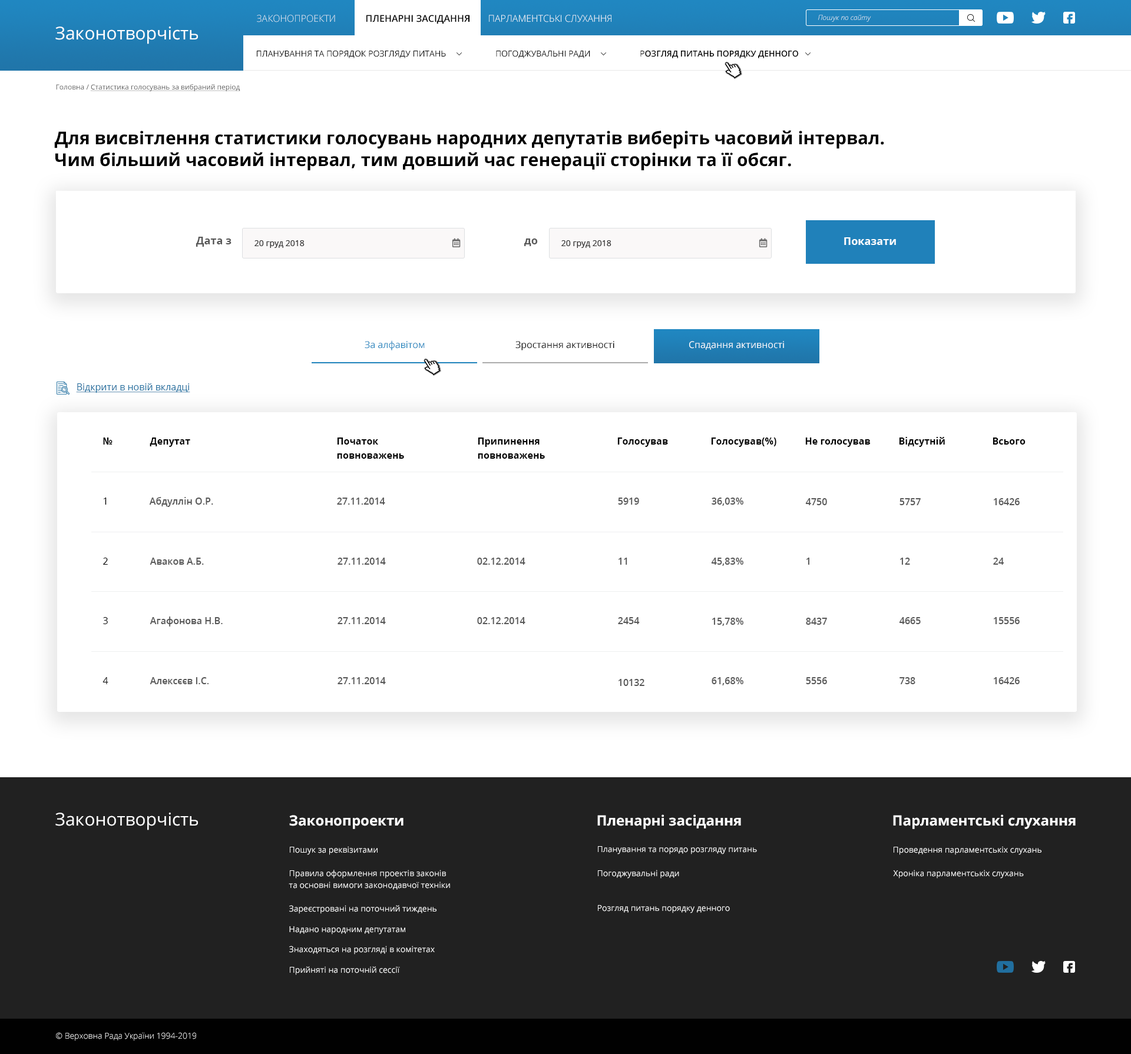
<style>
.page{position:relative;width:1131px;height:1054px;background:#ffffff}
.page>*{position:absolute;margin:0}
.t1{font:9.4px "OpenSans-Light";color:#dee9f2;text-transform:uppercase}
.t2{font:9.4px "OpenSans-SemiBold";color:#000000;text-transform:uppercase}
.t3{font:9.4px "OpenSans-Light";color:#ffffff;text-transform:uppercase}
.t4{font:7.1px "OpenSans-LightItalic";color:#ffffff}
.t5{font:17.7px "OpenSans-Regular";color:#ffffff}
.t6{font:8.2px "OpenSans-Regular";color:#000000}
.t7{font:8.2px "OpenSans-SemiBold";color:#000000}
.t8{font:7.1px "OpenSans-Regular";color:#585858;text-decoration:underline}
.t9{font:7.1px "OpenSans-Regular";color:#585858}
.t10{font:17.7px/21.8px "OpenSans-Bold";color:#000000}
.t11{font:10.6px "OpenSans-Bold";color:#585858}
.t12{font:8.2px "OpenSans";color:#323232}
.t13{font:10.6px "OpenSans-Bold";color:#ffffff}
.t14{font:9.4px "OpenSans-Regular";color:#2084bd}
.t15{font:9.4px "OpenSans-Regular";color:#000000}
.t16{font:9.4px "OpenSans-Regular";color:#ffffff}
.t17{font:9.4px "OpenSans-Regular";color:#216f9f;text-decoration:underline}
.t18{font:9.4px "OpenSans-Bold";color:#000000}
.t19{font:9.4px/14.1px "OpenSans-Bold";color:#000000}
.t20{font:9.4px "OpenSans-SemiBold";color:#585858}
.t21{font:14.1px "OpenSans-Bold";color:#ffffff}
.t22{font:8.2px "OpenSans-Regular";color:#ffffff}
.t23{font:8.2px/11.8px "OpenSans-Regular";color:#ffffff}
.t24{font:8.2px/15.3px "OpenSans-Regular";color:#ffffff}
.t25{font:8.2px "OpenSans-Light";color:#ffffff}
</style>
<div class="page">
<p class="t1" style="left:257px;top:15px;width:78px;height:7px">Законопроекти</p>
<p class="t2" style="left:366px;top:15px;width:103px;height:9px">пленарні засідання</p>
<p class="t3" style="left:489px;top:15px;width:122px;height:7px">парламентські слухання</p>
<p class="t4" style="left:818px;top:15px;width:53px;height:7px">Пошук по сайту</p>
<p class="t5" style="left:55px;top:27px;width:143px;height:17px">Законотворчість</p>
<p class="t6" style="left:257px;top:50px;width:541px;height:8px">ПЛАНУВАННЯ ТА ПОРЯДОК РОЗГЛЯДУ ПИТАНЬ                       ПОГОДЖУВАЛЬНІ РАДИ                       Р<span class="t7">ОЗГЛЯД ПИТАНЬ ПОРЯДКУ ДЕННОГО</span></p>
<p class="t8" style="left:56px;top:84px;width:184px;height:7px"><span class="t9">Головна / </span>Статистика голосувань за вибраний період</p>
<p class="t10" style="left:54px;top:130px;width:830px;height:41px">Для висвітлення статистики голосувань народних депутатів виберіть часовий інтервал.<br>Чим більший часовий інтервал, тим довший час генерації сторінки та її обсяг.</p>
<p class="t11" style="left:196px;top:237px;width:35px;height:10px">Дата з</p>
<p class="t12" style="left:254px;top:240px;width:51px;height:8px">20 груд 2018</p>
<p class="t11" style="left:524px;top:239px;width:14px;height:7px">до</p>
<p class="t12" style="left:561px;top:240px;width:50px;height:8px">20 груд 2018</p>
<p class="t13" style="left:844px;top:237px;width:52px;height:8px">Показати</p>
<p class="t14" style="left:365px;top:340px;width:60px;height:10px">За алфавітом</p>
<p class="t15" style="left:515px;top:341px;width:99px;height:9px">Зростання активності</p>
<p class="t16" style="left:689px;top:341px;width:95px;height:9px">Спадання активності</p>
<p class="t17" style="left:76px;top:383px;width:114px;height:10px">Відкрити в новій вкладці</p>
<p class="t18" style="left:103px;top:438px;width:10px;height:7px">№</p>
<p class="t18" style="left:150px;top:438px;width:40px;height:9px">Депутат</p>
<p class="t19" style="left:337px;top:438px;width:67px;height:21px">Початок <br>повноважень</p>
<p class="t19" style="left:478px;top:438px;width:67px;height:21px">Припинення <br>повноважень</p>
<p class="t18" style="left:617px;top:438px;width:51px;height:9px">Голосував</p>
<p class="t18" style="left:711px;top:438px;width:65px;height:9px">Голосував(%)</p>
<p class="t18" style="left:805px;top:438px;width:66px;height:9px">Не голосував</p>
<p class="t18" style="left:899px;top:437px;width:46px;height:10px">Відсутній</p>
<p class="t18" style="left:993px;top:438px;width:33px;height:7px">Всього</p>
<p class="t15" style="left:104px;top:498px;width:3px;height:7px">1</p>
<p class="t20" style="left:149px;top:497px;width:64px;height:10px">Абдуллін О.Р.</p>
<p class="t20" style="left:337px;top:498px;width:48px;height:7px">27.11.2014</p>
<p class="t20" style="left:618px;top:498px;width:21px;height:7px">5919</p>
<p class="t20" style="left:712px;top:498px;width:31px;height:8px">36,03%</p>
<p class="t20" style="left:805px;top:498px;width:22px;height:7px">4750</p>
<p class="t20" style="left:899px;top:498px;width:22px;height:7px">5757</p>
<p class="t20" style="left:994px;top:498px;width:26px;height:7px">16426</p>
<p class="t15" style="left:103px;top:558px;width:5px;height:7px">2</p>
<p class="t20" style="left:150px;top:558px;width:54px;height:7px">Аваков А.Б.</p>
<p class="t20" style="left:338px;top:558px;width:48px;height:7px">27.11.2014</p>
<p class="t20" style="left:477px;top:558px;width:48px;height:7px">02.12.2014</p>
<p class="t20" style="left:618px;top:558px;width:9px;height:7px">11</p>
<p class="t20" style="left:711px;top:558px;width:32px;height:8px">45,83%</p>
<p class="t20" style="left:806px;top:558px;width:3px;height:7px">1</p>
<p class="t20" style="left:900px;top:558px;width:10px;height:7px">12</p>
<p class="t20" style="left:993px;top:558px;width:11px;height:7px">24</p>
<p class="t15" style="left:103px;top:617px;width:5px;height:7px">3</p>
<p class="t20" style="left:150px;top:617px;width:73px;height:10px">Агафонова Н.В.</p>
<p class="t20" style="left:338px;top:617px;width:48px;height:7px">27.11.2014</p>
<p class="t20" style="left:477px;top:617px;width:48px;height:7px">02.12.2014</p>
<p class="t20" style="left:618px;top:617px;width:22px;height:7px">2454</p>
<p class="t20" style="left:712px;top:618px;width:31px;height:8px">15,78%</p>
<p class="t20" style="left:806px;top:618px;width:21px;height:7px">8437</p>
<p class="t20" style="left:899px;top:617px;width:22px;height:7px">4665</p>
<p class="t20" style="left:994px;top:617px;width:26px;height:7px">15556</p>
<p class="t15" style="left:102px;top:677px;width:6px;height:7px">4</p>
<p class="t20" style="left:150px;top:677px;width:59px;height:7px">Алексєєв І.С.</p>
<p class="t20" style="left:338px;top:677px;width:48px;height:7px">27.11.2014</p>
<p class="t20" style="left:712px;top:677px;width:31px;height:9px">61,68%</p>
<p class="t20" style="left:806px;top:677px;width:21px;height:7px">5556</p>
<p class="t20" style="left:899px;top:677px;width:16px;height:7px">738</p>
<p class="t20" style="left:994px;top:677px;width:26px;height:7px">16426</p>
<p class="t20" style="left:618px;top:679px;width:26px;height:7px">10132</p>
<p class="t5" style="left:55px;top:813px;width:143px;height:18px">Законотворчість</p>
<p class="t21" style="left:289px;top:815px;width:114px;height:14px">Законопроекти</p>
<p class="t21" style="left:597px;top:815px;width:144px;height:14px">Пленарні засідання</p>
<p class="t21" style="left:893px;top:815px;width:183px;height:14px">Парламентські слухання</p>
<p class="t22" style="left:290px;top:846px;width:88px;height:9px">Пошук за реквізитами</p>
<p class="t22" style="left:598px;top:846px;width:159px;height:9px">Планування та порядо розгляду питань</p>
<p class="t22" style="left:894px;top:846px;width:147px;height:9px">Проведення парламентськіх слухань</p>
<p class="t23" style="left:289px;top:870px;width:161px;height:20px"><span class="t24">Правила оформлення проектів законів<br></span>та основні вимоги законодавчої техніки</p>
<p class="t22" style="left:598px;top:870px;width:81px;height:9px">Погоджувальні ради</p>
<p class="t22" style="left:893px;top:870px;width:131px;height:9px">Хроніка парламентськіх слухань</p>
<p class="t22" style="left:289px;top:905px;width:147px;height:9px">Зареєстровані на поточний тиждень</p>
<p class="t22" style="left:598px;top:905px;width:132px;height:9px">Розгляд питань порядку денного</p>
<p class="t22" style="left:289px;top:927px;width:116px;height:8px">Надано народним депутатам</p>
<p class="t22" style="left:289px;top:946px;width:146px;height:9px">Знаходяться на розгляді в комітетах</p>
<p class="t22" style="left:290px;top:967px;width:110px;height:8px">Прийняті на поточній сессії</p>
<p class="t25" style="left:56px;top:1033px;width:140px;height:8px">© Верховна Рада України 1994-2019</p>
</div>
